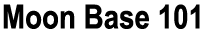
<style>
.page{position:relative;width:204px;height:38px;background:#ffffff}
.page>*{position:absolute;margin:0}
.t1{font:33.2px "Arial-BoldMT";color:#000000;scale:0.84 1}
</style>
<div class="page">
<p class="t1" style="left:3px;top:4px;width:197px;height:25px">Moon Base 101</p>
</div>
